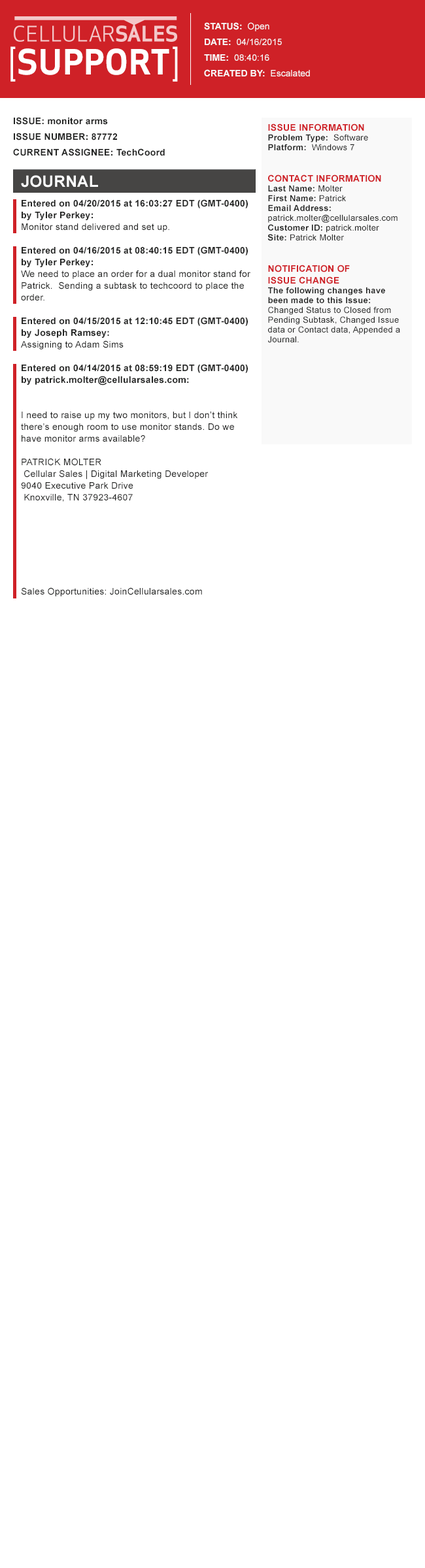
<style>
.page{position:relative;width:425px;height:1568px;background:#ffffff}
.page>*{position:absolute;margin:0}
.t1{font:9.1px/15.7px "Arial-BoldMT";color:#f9f9f9}
.t2{font:9.1px/15.7px "ArialMT";color:#f9f9f9}
.t3{font:34px "VerizonApex-Bold";letter-spacing:0.02em;color:#ffffff}
.t4{font:34px "VerizonApex-Book";letter-spacing:0.02em;color:#ffffff}
.t5{font:9.1px/11.8px "ArialMT";letter-spacing:0.02em;color:#242524}
.t6{font:9.1px/15.7px "Arial-BoldMT";letter-spacing:0.02em;color:#242524}
.t7{font:9.1px/11.8px "Arial-BoldMT";letter-spacing:0.02em;color:#242524}
.t8{font:8.5px/9.8px "ArialMT";letter-spacing:0.02em;color:#242524}
.t9{font:9.1px/15.7px "Arial-BoldMT";letter-spacing:0.02em;color:#cf2127}
.t10{font:8.5px/9.8px "Arial-BoldMT";letter-spacing:0.02em;color:#242524}
.t11{font:9.1px/15.7px "Arial-BoldMT";letter-spacing:0.02em;color:#cf2127;text-transform:uppercase}
.t12{font:9.1px/11.8px "Arial-BoldMT";letter-spacing:0.02em;color:#cf2127;text-transform:uppercase}
.t13{font:15.7px "Arial-BoldMT";letter-spacing:0.02em;color:#ffffff}
</style>
<div class="page">
<p class="t1" style="left:204px;top:22px;width:106px;height:54px">STATUS: <span class="t2"> Open<br></span>DATE:<span class="t2">  04/16/2015<br></span>TIME:<span class="t2">  08:40:16<br></span>CREATED BY:<span class="t2">  Escalated</span></p>
<p class="t3" style="left:10px;top:46px;width:168px;height:36px"><span class="t4">[</span>SUPPORT<span class="t4">]</span></p>
<p class="t5" style="left:13px;top:117px;width:237px;height:479px"><span class="t6">ISSUE: monitor arms <br>ISSUE NUMBER: 87772<br>CURRENT ASSIGNEE: TechCoord<br><br><br><br></span><span class="t7">Entered on 04/20/2015 at 16:03:27 EDT (GMT-0400) by Tyler Perkey:<br></span>Monitor stand delivered and set up.<br><br><span class="t7">Entered on 04/16/2015 at 08:40:15 EDT (GMT-0400) by Tyler Perkey:<br></span>We need to place an order for a dual monitor stand for Patrick.  Sending a subtask to techcoord to place the order.<br><br><span class="t7">Entered on 04/15/2015 at 12:10:45 EDT (GMT-0400) by Joseph Ramsey:<br></span>Assigning to Adam Sims<br><br><span class="t7">Entered on 04/14/2015 at 08:59:19 EDT (GMT-0400) by patrick.molter@cellularsales.com:<br></span>   <br> <br>I need to raise up my two monitors, but I don’t think there’s enough room to use monitor stands. Do we have monitor arms available? <br>  <br>PATRICK MOLTER<br> Cellular Sales | Digital Marketing Developer <br>9040 Executive Park Drive<br> Knoxville, TN 37923-4607 <br> <br>  <br><br> <br>  <br> <br>  <br>Sales Opportunities: JoinCellularsales.com</p>
<p class="t8" style="left:267px;top:123px;width:133px;height:220px"><span class="t9">ISSUE INFORMATION<br></span><span class="t10">Problem Type:</span>  Software     <span class="t10">Platform: </span> Windows 7 <br><br><span class="t11">Contact Information<br></span><span class="t10">Last Name:</span> Molter <br><span class="t10">First Name:</span> Patrick  <br><span class="t10">Email Address: </span>patrick.molter@cellularsales.com<br><span class="t10">Customer ID: </span>patrick.molter <br><span class="t10">Site: </span>Patrick Molter <br><br><span class="t11">Notification </span><span class="t12">of<br>Issue Change <br></span><span class="t10">The following changes have been made to this Issue: <br></span>Changed Status to Closed from Pending Subtask, Changed Issue data or Contact data, Appended a Journal.</p>
<p class="t13" style="left:21px;top:175px;width:77px;height:13px">JOURNAL</p>
</div>
